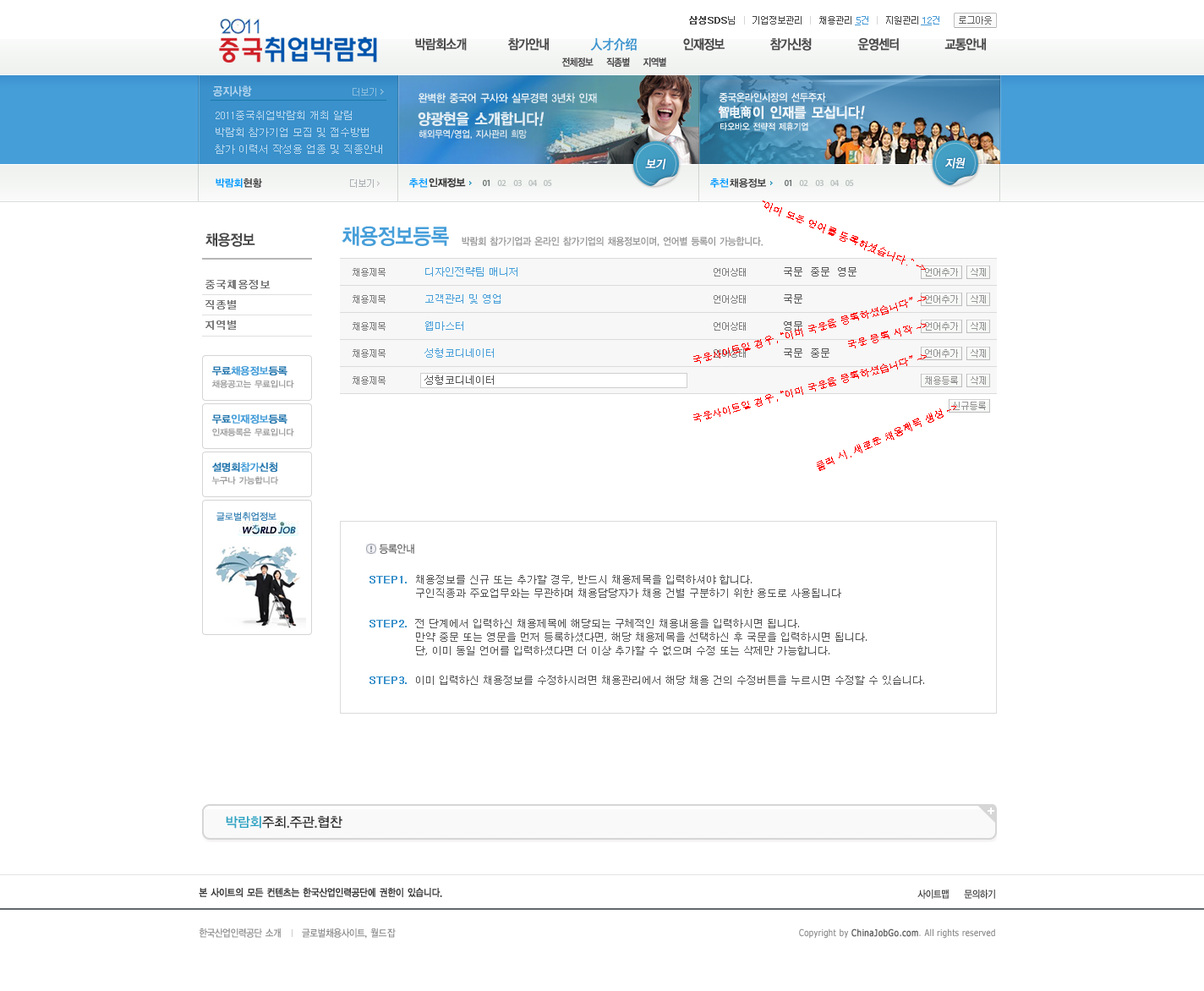
<style>
.page{position:relative;width:1204px;height:991px;background:#ffffff}
.page>*{position:absolute;margin:0}
.t1{font:9.3px "Dotum";letter-spacing:-0.1em;color:#464646}
.t2{font:9.3px "Dotum";letter-spacing:-0.1em;color:#464646;font-weight:bold}
.t3{font:9.3px "Dotum";letter-spacing:-0.1em;color:#d6d6d6}
.t4{font:9.3px "Dotum";letter-spacing:-0.1em;color:#666666}
.t5{font:9.3px "Dotum";color:#4298d5;text-decoration:underline}
.t6{font:9.3px "Dotum";color:#4298d5}
.t7{font:13.5px "YDIYGO130-KSCpc-EUC-H";letter-spacing:-0.14em;color:#4a4a4a;font-weight:bold;scale:0.86 1}
.t8{font:13.5px "SimHei";letter-spacing:-0.08em;color:#3e95cf;font-weight:bold;scale:0.9 1}
.t9{font:10.1px "YDIYGO130-KSCpc-EUC-H";letter-spacing:-0.14em;color:#4a4a4a;font-weight:bold;scale:0.86 1}
.t10{font:11.8px "YDIYGO140-KSCpc-EUC-H";letter-spacing:-0.1em;color:#b9d7ef;scale:0.9 1}
.t11{font:11.2px "YDIYGO140-KSCpc-EUC-H";letter-spacing:-0.1em;color:#e4eef4;scale:0.9 1}
.t12{font:10.5px "YDIYGO140-KSCpc-EUC-H";letter-spacing:-0.1em;color:#f0f5f8;scale:0.9 1}
.t13{font:10.1px/16.9px "Dotum";color:#b9d7ef}
.t14{font:15.3px "YDIYGO140-KSCpc-EUC-H";letter-spacing:-0.1em;color:#e4eef4;font-weight:bold;scale:0.9 1}
.t15{font:15.3px "YDIYGO140-KSCpc-EUC-H";letter-spacing:-0.1em;color:#e4eef4;font-weight:bold;font-style:italic;scale:0.9 1}
.t16{font:13.1px "SimHei";letter-spacing:-0.1em;color:#f0f5f8;font-weight:bold;scale:0.9 1}
.t17{font:14.5px "YDIYGO140-KSCpc-EUC-H";letter-spacing:-0.1em;color:#f0f5f8;font-weight:bold;scale:0.9 1}
.t18{font:14.5px "YDIYGO140-KSCpc-EUC-H";letter-spacing:-0.1em;color:#f0f5f8;font-weight:bold;font-style:italic;scale:0.9 1}
.t19{font:9.2px "YDIYGO140-KSCpc-EUC-H";letter-spacing:-0.1em;color:#f0f5f8;scale:0.9 1}
.t20{font:9.8px "YDIYGO140-KSCpc-EUC-H";letter-spacing:-0.1em;color:#dde8ef;scale:0.9 1}
.t21{font:11.8px "YDIYGO130-KSCpc-EUC-H";letter-spacing:-0.1em;color:#ffffff;font-weight:bold;font-style:italic;scale:0.9 1}
.t22{font:10.1px "YDIYGO140-KSCpc-EUC-H";letter-spacing:-0.1em;color:#0099ff}
.t23{font:10.1px "YDIYGO140-KSCpc-EUC-H";letter-spacing:-0.1em;color:#3e3e3e}
.t24{font:10.1px "Dotum";color:#ff0000}
.t25{font:15.2px "YDIYGO140-KSCpc-EUC-H";letter-spacing:-0.1em;color:#454545;scale:0.9 1}
.t26{font:22px "YDIYGO140-KSCpc-EUC-H";letter-spacing:-0.1em;color:#469ed9;scale:0.9 1}
.t27{font:10.1px "YDIYGO140-KSCpc-EUC-H";letter-spacing:-0.1em;color:#999999;scale:0.9 1}
.t28{font:9.3px "Dotum";letter-spacing:-0.1em;color:#7d7d7d}
.t29{font:10.1px "Dotum";color:#469ed9}
.t30{font:10.1px "Dotum";color:#555555}
.t31{font:9.3px "Dotum";letter-spacing:-0.1em;color:#969696}
.t32{font:10.1px/20.3px "Dotum";color:#808080;font-weight:bold}
.t33{font:10.1px "YDIYGO130-KSCpc-EUC-H";letter-spacing:-0.1em;color:#469ed9;font-weight:bold}
.t34{font:10.1px "YDIYGO130-KSCpc-EUC-H";letter-spacing:-0.1em;color:#2476ad;font-weight:bold}
.t35{font:8.5px "YDIYGO130-KSCpc-EUC-H";letter-spacing:-0.1em;color:#a1a1a1;font-weight:bold}
.t36{font:9.3px "YDIYGO120-KSCpc-EUC-H";letter-spacing:-0.1em;color:#2f7cb1;font-weight:bold}
.t37{font:11px "YDIYGO130-KSCpc-EUC-H";letter-spacing:-0.1em;color:#676768;scale:0.9 1}
.t38{font:10.1px "Dotum";color:#3a91cb;font-weight:bold}
.t39{font:10.1px/13.5px "Dotum";color:#555555}
.t40{font:13.5px "YDIYGO130-KSCpc-EUC-H";letter-spacing:-0.1em;color:#323131}
.t41{font:13.5px "YDIYGO130-KSCpc-EUC-H";letter-spacing:-0.1em;color:#2ea2c2}
.t42{font:10.1px "YDIYGO130-KSCpc-EUC-H";letter-spacing:-0.1em;color:#373737;font-weight:bold;scale:0.86 1}
.t43{font:10.1px "YDIYGO130-KSCpc-EUC-H";letter-spacing:-0.1em;color:#373737;scale:0.86 1}
.t44{font:10.1px "YDIYGO130-KSCpc-EUC-H";letter-spacing:-0.1em;color:#868686;scale:0.86 1}
.t45{font:10.1px "YDIYGO130-KSCpc-EUC-H";letter-spacing:-0.05em;color:#868686;scale:0.86 1}
.t46{font:9.3px "Tahoma";letter-spacing:0.05em;color:#868686;scale:0.86 1}
.t47{font:9.3px "Tahoma";letter-spacing:0.05em;color:#626262;font-weight:bold;scale:0.86 1}
</style>
<div class="page">
<p class="t1" style="left:689px;top:16px;width:303px;height:9px"><span class="t2">삼성SDS</span>님   <span class="t3">| </span>  기업정보관리   <span class="t3">| </span>  채용관리          <span class="t3">|</span>   지원관리                <span class="t4">로그아웃</span></p>
<p class="t5" style="left:855px;top:16px;width:13px;height:9px">5<span class="t6">건</span></p>
<p class="t5" style="left:921px;top:16px;width:18px;height:9px">12<span class="t6">건</span></p>
<p class="t7" style="left:415px;top:38px;width:52px;height:13px">박람회소개</p>
<p class="t7" style="left:508px;top:38px;width:41px;height:13px">참가안내</p>
<p class="t8" style="left:590px;top:38px;width:46px;height:13px">人才介绍</p>
<p class="t7" style="left:683px;top:38px;width:41px;height:13px">인재정보</p>
<p class="t7" style="left:770px;top:38px;width:41px;height:13px">참가신청</p>
<p class="t7" style="left:857px;top:38px;width:42px;height:13px">운영센터</p>
<p class="t7" style="left:944px;top:38px;width:42px;height:13px">교통안내</p>
<p class="t9" style="left:561px;top:57px;width:105px;height:10px">전체정보    직종별    지역별</p>
<p class="t10" style="left:213px;top:85px;width:39px;height:12px">공지사항</p>
<p class="t11" style="left:418px;top:93px;width:179px;height:10px">완벽한 중국어 구사와 실무경력 3년차 인재</p>
<p class="t12" style="left:718px;top:92px;width:108px;height:10px">중국온라인시장의 선두주자</p>
<p class="t13" style="left:215px;top:111px;width:167px;height:43px">2011중국취업박람회 개최 알림<br>박람회 참가기업 모집 및 접수방법<br>참가 이력서 작성용 업종 및 직종안내</p>
<p class="t14" style="left:418px;top:112px;width:126px;height:14px">양광현을 소개합니다<span class="t15">!</span></p>
<p class="t16" style="left:718px;top:106px;width:33px;height:12px">智电商</p>
<p class="t17" style="left:752px;top:106px;width:113px;height:13px">이 인재를 모십니다<span class="t18">!</span></p>
<p class="t19" style="left:720px;top:122px;width:88px;height:9px">타오바오 전략적 제휴기업</p>
<p class="t20" style="left:418px;top:129px;width:109px;height:10px">해외무역/영업, 지사관리 희망</p>
<p class="t21" style="left:645px;top:158px;width:21px;height:12px">보기</p>
<p class="t21" style="left:945px;top:157px;width:20px;height:12px">지원</p>
<p class="t22" style="left:216px;top:178px;width:27px;height:10px">박람회</p>
<p class="t23" style="left:243px;top:178px;width:19px;height:10px">현황</p>
<p class="t22" style="left:409px;top:178px;width:19px;height:10px">추천</p>
<p class="t23" style="left:429px;top:178px;width:37px;height:10px">인재정보</p>
<p class="t22" style="left:710px;top:178px;width:19px;height:10px">추천</p>
<p class="t23" style="left:729px;top:178px;width:37px;height:10px">채용정보</p>
<p class="t24" style="left:762px;top:200px;width:164px;height:70px;rotate:22deg">“이미 모든 언어를 등록하셨습니다.” -&gt;</p>
<p class="t25" style="left:205px;top:232px;width:50px;height:15px">채용정보</p>
<p class="t26" style="left:341px;top:226px;width:108px;height:20px">채용정보등록</p>
<p class="t27" style="left:462px;top:237px;width:300px;height:10px">박람회 참가기업과 온라인 참가기업의 채용정보이며, 언어별 등록이 가능합니다.</p>
<p class="t28" style="left:352px;top:268px;width:33px;height:8px">채용제목</p>
<p class="t29" style="left:425px;top:267px;width:92px;height:9px">디자인전략팀 매니저</p>
<p class="t28" style="left:713px;top:268px;width:33px;height:8px">언어상태</p>
<p class="t30" style="left:784px;top:267px;width:72px;height:9px">국문  중문  영문</p>
<p class="t31" style="left:925px;top:268px;width:33px;height:8px">언어추가</p>
<p class="t32" style="left:205px;top:280px;width:65px;height:50px">중국채용정보<br>직종별<br>지역별</p>
<p class="t28" style="left:352px;top:295px;width:33px;height:8px">채용제목</p>
<p class="t29" style="left:425px;top:294px;width:75px;height:9px">고객관리 및 영업</p>
<p class="t24" style="left:693px;top:296px;width:233px;height:67px;rotate:-15deg">국문사이트일 경우, “이미 국문을 등록하셨습니다” -&gt;</p>
<p class="t28" style="left:713px;top:295px;width:33px;height:8px">언어상태</p>
<p class="t30" style="left:784px;top:294px;width:18px;height:9px">국문</p>
<p class="t31" style="left:925px;top:295px;width:33px;height:8px">언어추가</p>
<p class="t28" style="left:352px;top:322px;width:33px;height:9px">채용제목</p>
<p class="t29" style="left:425px;top:321px;width:38px;height:10px">웹마스터</p>
<p class="t28" style="left:713px;top:322px;width:33px;height:9px">언어상태</p>
<p class="t30" style="left:784px;top:321px;width:18px;height:10px">영문</p>
<p class="t24" style="left:848px;top:323px;width:78px;height:25px;rotate:-15deg">국문 등록 시작 -&gt;</p>
<p class="t31" style="left:925px;top:322px;width:33px;height:9px">언어추가</p>
<p class="t28" style="left:352px;top:349px;width:33px;height:9px">채용제목</p>
<p class="t29" style="left:424px;top:348px;width:70px;height:10px">성형코디네이터</p>
<p class="t28" style="left:713px;top:349px;width:33px;height:9px">언어상태</p>
<p class="t30" style="left:784px;top:348px;width:45px;height:10px">국문  중문</p>
<p class="t31" style="left:925px;top:349px;width:33px;height:9px">언어추가</p>
<p class="t24" style="left:693px;top:354px;width:233px;height:68px;rotate:-15deg">국문사이트일 경우, “이미 국문을 등록하셨습니다” -&gt;</p>
<p class="t33" style="left:212px;top:366px;width:75px;height:9px"><span class="t34">무료</span>채용정보<span class="t34">등록</span></p>
<p class="t28" style="left:352px;top:376px;width:33px;height:9px">채용제목</p>
<p class="t30" style="left:424px;top:375px;width:70px;height:10px">성형코디네이터</p>
<p class="t31" style="left:925px;top:376px;width:33px;height:9px">채용등록</p>
<p class="t35" style="left:211px;top:380px;width:83px;height:8px">채용공고는 무료입니다</p>
<p class="t31" style="left:953px;top:402px;width:33px;height:8px">신규등록</p>
<p class="t24" style="left:817px;top:406px;width:139px;height:65px;rotate:-23deg">클릭 시, 새로운 채용제목 생성 -&gt;</p>
<p class="t33" style="left:212px;top:414px;width:75px;height:9px"><span class="t34">무료</span>인재정보<span class="t34">등록</span></p>
<p class="t35" style="left:212px;top:428px;width:82px;height:8px">인재등록은 무료입니다</p>
<p class="t34" style="left:212px;top:462px;width:65px;height:10px">설명회<span class="t33">참가</span>신청</p>
<p class="t35" style="left:211px;top:476px;width:67px;height:8px">누구나 가능합니다</p>
<p class="t36" style="left:216px;top:511px;width:60px;height:10px">글로벌취업정보</p>
<p class="t37" style="left:379px;top:544px;width:35px;height:10px">등록안내</p>
<p class="t38" style="left:369px;top:576px;width:38px;height:7px">STEP1.</p>
<p class="t39" style="left:416px;top:575px;width:425px;height:23px">채용정보를 신규 또는 추가할 경우, 반드시 채용제목을 입력하셔야 합니다.<br>구인직종과 주요업무와는 무관하며 채용담당자가 채용 건별 구분하기 위한 용도로 사용됩니다</p>
<p class="t38" style="left:369px;top:620px;width:38px;height:7px">STEP2.</p>
<p class="t39" style="left:415px;top:619px;width:451px;height:36px">전 단계에서 입력하신 채용제목에 해당되는 구체적인 채용내용을 입력하시면 됩니다.<br>만약 중문 또는 영문을 먼저 등록하셨다면, 해당 채용제목을 선택하신 후 국문을 입력하시면 됩니다.<br>단, 이미 동일 언어를 입력하셨다면 더 이상 추가할 수 없으며 수정 또는 삭제만 가능합니다.</p>
<p class="t38" style="left:369px;top:676px;width:38px;height:8px">STEP3.</p>
<p class="t30" style="left:416px;top:675px;width:508px;height:10px">이미 입력하신 채용정보를 수정하시려면 채용관리에서 해당 채용 건의 수정버튼을 누르시면 수정할 수 있습니다.</p>
<p class="t40" style="left:226px;top:816px;width:116px;height:12px"><span class="t41">박람회</span>주최.주관.협찬</p>
<p class="t42" style="left:199px;top:888px;width:243px;height:9px">본 사이트의 모든 컨텐츠는 한국산업인력공단에 권한이 있습니다.</p>
<p class="t43" style="left:917px;top:889px;width:31px;height:10px">사이트맵</p>
<p class="t43" style="left:964px;top:889px;width:31px;height:10px">문의하기</p>
<p class="t44" style="left:199px;top:928px;width:197px;height:10px">한국산업인력공단 소개      글로벌채용사이트, <span class="t45">월드잡</span></p>
<p class="t46" style="left:799px;top:928px;width:196px;height:10px">Copyright by <span class="t47">ChinaJobGo.com</span>. All rights reserved</p>
</div>
